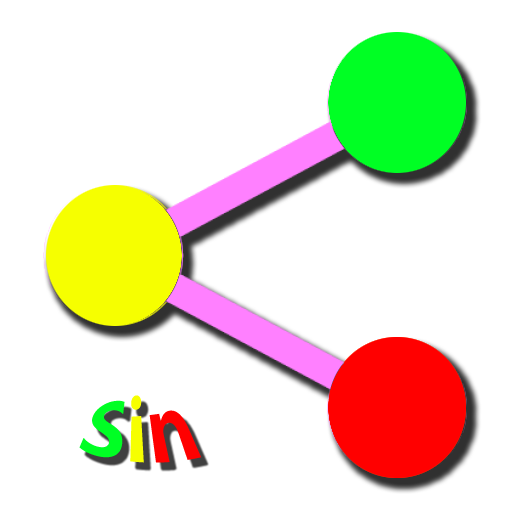
<style>
.page{position:relative;width:512px;height:512px;background:#ffffff}
.page>*{position:absolute;margin:0}
.t1{font:72px "MicrosoftYaHei-Bold";color:#00ff24}
.t2{font:72px "MicrosoftYaHei-Bold";color:#f6ff00}
.t3{font:72px "MicrosoftYaHei-Bold";color:#ff0000}
</style>
<div class="page">
<p class="t1" style="left:79px;top:395px;width:123px;height:68px">S<span class="t2">i</span><span class="t3">n</span></p>
</div>
